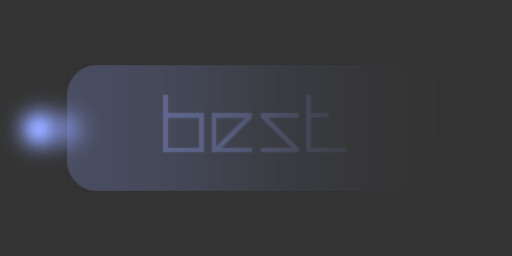
<style>
.page{position:relative;width:512px;height:256px;background:#333333}
.page>*{position:absolute;margin:0}
.t1{font:113.8px "AuricomRegular";letter-spacing:0.05em}
</style>
<div class="page">
<p class="t1" style="left:163px;top:95px;width:184px;height:57px">Best</p>
</div>
